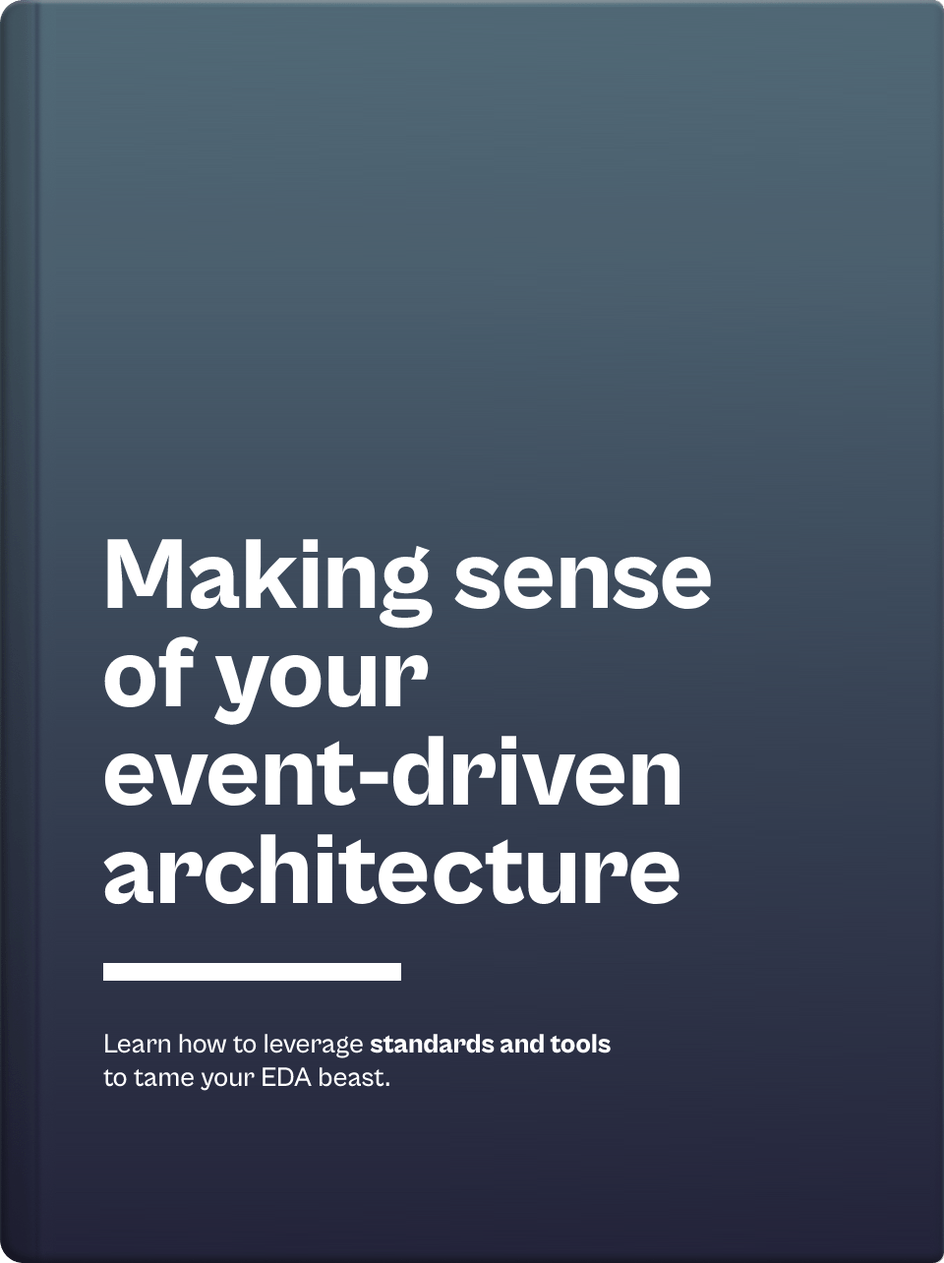
<style>
.page{position:relative;width:944px;height:1263px}
.page>*{position:absolute;margin:0}
.t1{font:102.3px/98.4px "CabinetGrotesk-Extrabold";color:#ffffff}
.t2{font:27.5px "CabinetGrotesk-Medium";color:#ffffff}
.t3{font:27.5px "CabinetGrotesk-Extrabold";color:#ffffff}
</style>
<div class="page">
<p class="t1" style="left:103px;top:539px;width:608px;height:366px">Making sense<br>of your<br>event-driven<br>architecture</p>
<p class="t2" style="left:103px;top:1034px;width:508px;height:57px">Learn how to leverage <span class="t3">standards and tools<br></span>to tame your EDA beast.</p>
</div>
